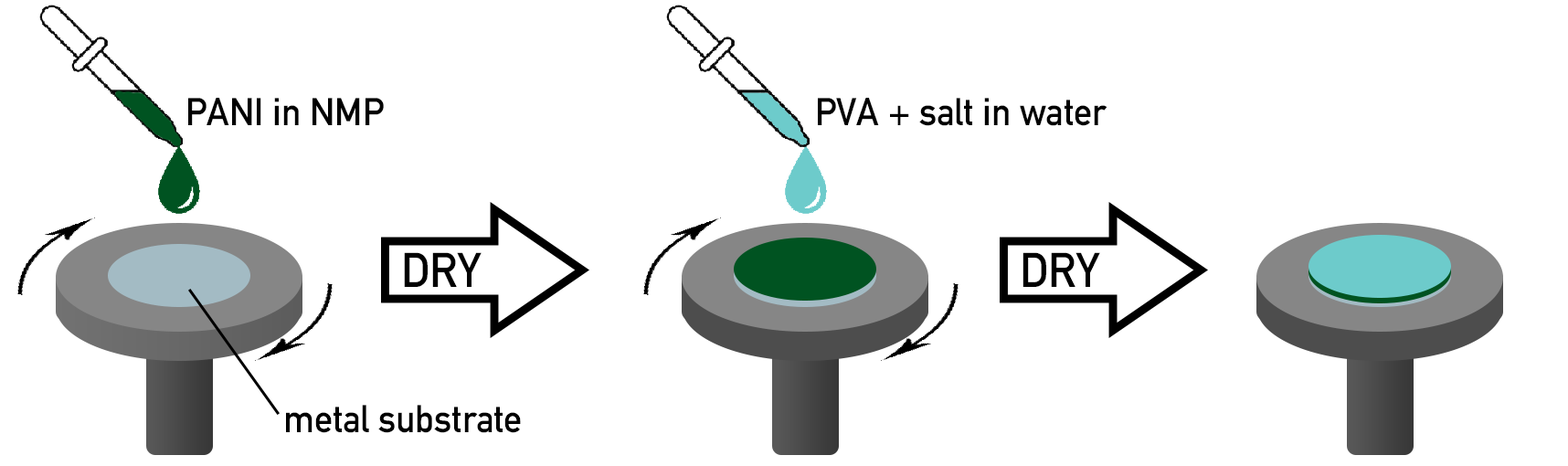
<style>
.page{position:relative;width:1568px;height:466px;background:#ffffff}
.page>*{position:absolute;margin:0}
.t1{font:38.4px "DIN-1451-Mittelschrift-Regular";color:#000000;scale:0.95 1}
.t2{font:48px "DIN-1451-Mittelschrift-Regular";color:#000000;scale:0.95 1}
</style>
<div class="page">
<p class="t1" style="left:188px;top:98px;width:196px;height:27px">PANI in NMP</p>
<p class="t1" style="left:818px;top:98px;width:289px;height:28px">PVA + salt in water</p>
<p class="t2" style="left:404px;top:252px;width:78px;height:35px">DRY</p>
<p class="t2" style="left:1022px;top:252px;width:78px;height:35px">DRY</p>
<p class="t1" style="left:286px;top:405px;width:235px;height:28px">metal substrate</p>
</div>
